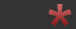
<style>
.page{position:relative;width:76px;height:29px;background:#333333}
.page>*{position:absolute;margin:0}
.t1{font:72px "ArialMT"}
</style>
<div class="page">
<p class="t1" style="left:48px;top:4px;width:24px;height:22px">*</p>
</div>
